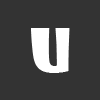
<style>
.page{position:relative;width:100px;height:100px;background:#333333}
.page>*{position:absolute;margin:0}
.t1{font:58.3px "ShowcardGothic-Reg";color:#ffffff}
</style>
<div class="page">
<p class="t1" style="left:31px;top:28px;width:39px;height:45px">u</p>
</div>
